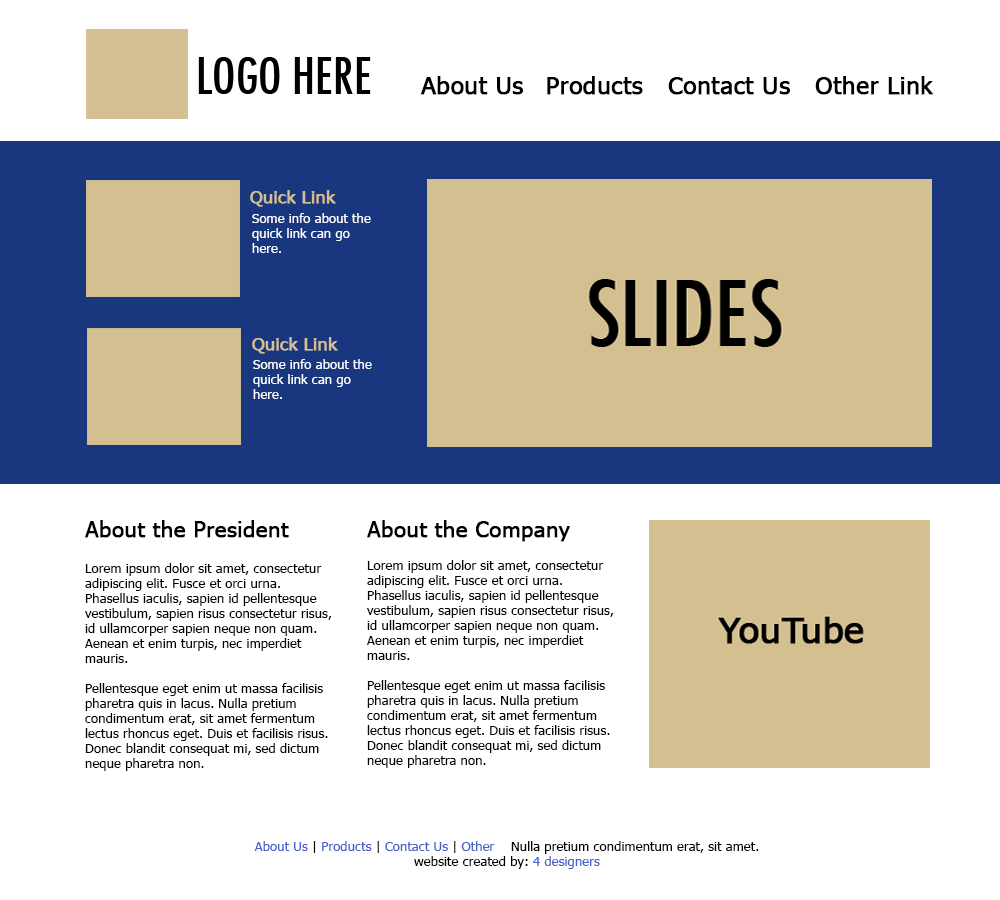
<style>
.page{position:relative;width:1000px;height:900px;background:#ffffff}
.page>*{position:absolute;margin:0}
.t1{font:22.9px "Tahoma";color:#000000;font-weight:bold;scale:1.06 1}
.t2{font:16.7px "Tahoma";color:#d4bf91;font-weight:bold;scale:1.06 1}
.t3{font:12.5px "Tahoma";color:#ffffff;scale:1.06 1}
.t4{font:20.8px "Tahoma";color:#000000;font-weight:bold;scale:1.06 1}
.t5{font:12.5px "Tahoma";color:#000000;scale:1.06 1}
.t6{font:12.5px "Tahoma";color:#4360cb;scale:1.06 1}
</style>
<div class="page">
<p class="t1" style="left:420px;top:76px;width:514px;height:19px">About Us   Products   Contact Us   Other Link</p>
<p class="t2" style="left:250px;top:190px;width:86px;height:17px">Quick Link</p>
<p class="t3" style="left:252px;top:213px;width:119px;height:40px">Some info about the <br>quick link can go <br>here.</p>
<p class="t2" style="left:252px;top:337px;width:86px;height:17px">Quick Link</p>
<p class="t3" style="left:253px;top:359px;width:119px;height:40px">Some info about the <br>quick link can go <br>here.</p>
<p class="t4" style="left:85px;top:520px;width:204px;height:18px">About the President</p>
<p class="t4" style="left:367px;top:520px;width:203px;height:22px">About the Company</p>
<p class="t5" style="left:85px;top:563px;width:247px;height:208px">Lorem ipsum dolor sit amet, consectetur <br>adipiscing elit. Fusce et orci urna. <br>Phasellus iaculis, sapien id pellentesque <br>vestibulum, sapien risus consectetur risus,<br>id ullamcorper sapien neque non quam. <br>Aenean et enim turpis, nec imperdiet <br>mauris.<br> <br>Pellentesque eget enim ut massa facilisis <br>pharetra quis in lacus. Nulla pretium <br>condimentum erat, sit amet fermentum<br>lectus rhoncus eget. Duis et facilisis risus. <br>Donec blandit consequat mi, sed dictum <br>neque pharetra non.</p>
<p class="t5" style="left:367px;top:560px;width:247px;height:208px">Lorem ipsum dolor sit amet, consectetur <br>adipiscing elit. Fusce et orci urna. <br>Phasellus iaculis, sapien id pellentesque <br>vestibulum, sapien risus consectetur risus,<br>id ullamcorper sapien neque non quam. <br>Aenean et enim turpis, nec imperdiet <br>mauris.<br> <br>Pellentesque eget enim ut massa facilisis <br>pharetra quis in lacus. Nulla pretium <br>condimentum erat, sit amet fermentum<br>lectus rhoncus eget. Duis et facilisis risus. <br>Donec blandit consequat mi, sed dictum <br>neque pharetra non.</p>
<p class="t5" style="left:254px;top:841px;width:505px;height:28px;text-align:center"><span class="t6">About Us</span> | <span class="t6">Products</span> | <span class="t6">Contact Us</span> | <span class="t6">Other</span>   Nulla pretium condimentum erat, sit amet.<br>website created by: <span class="t6">4 designers</span></p>
</div>
